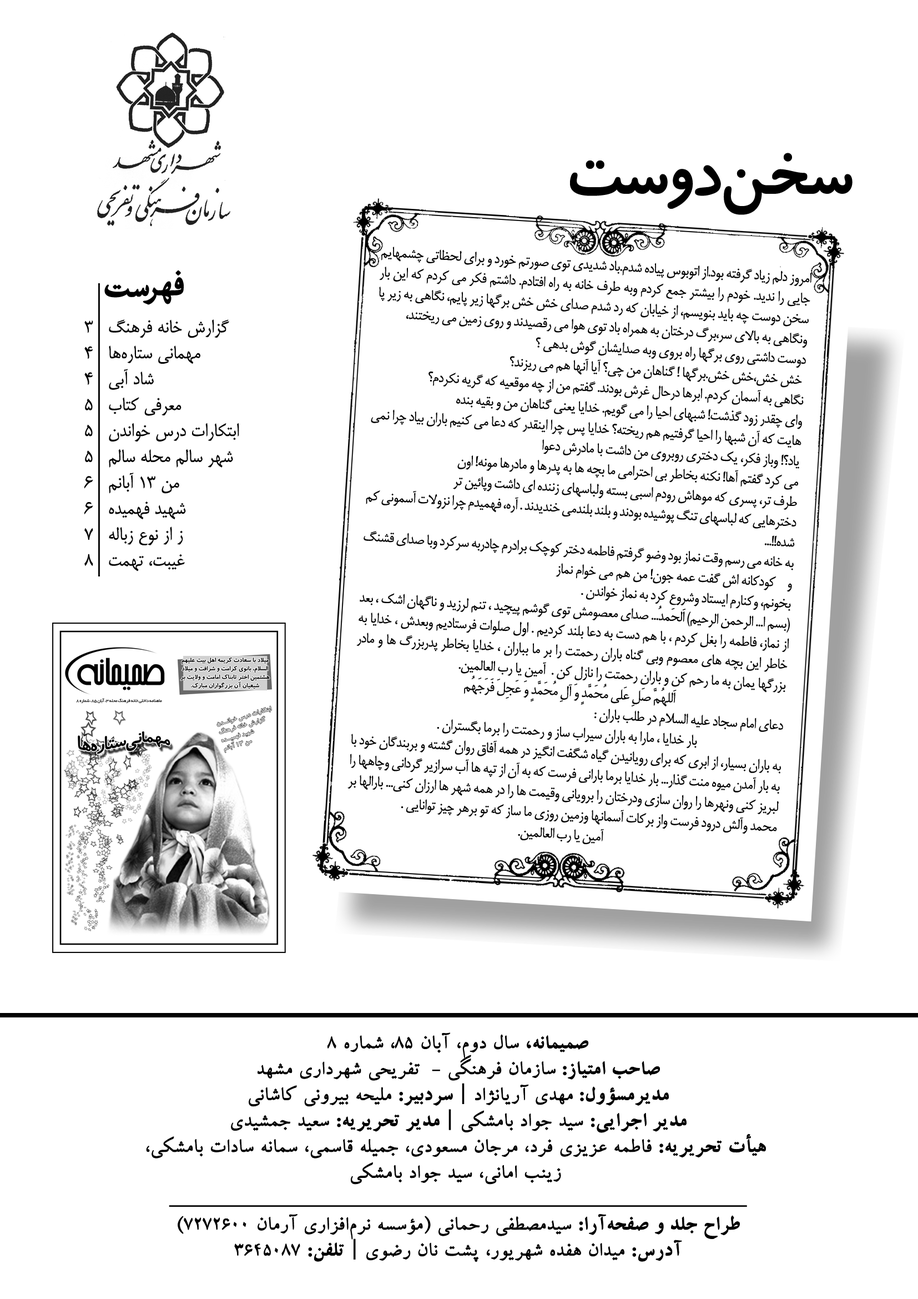
<style>
.page{position:relative;width:918px;height:1299px;background:#ffffff}
.page>*{position:absolute;margin:0}
.t1{font:74px "BKoodakBold";letter-spacing:-0.05em;color:#000000}
.t2{font:17px "BMitra";letter-spacing:-0.025em;color:#000000}
.t3{font:21.6px "BMitra";color:#000000}
.t4{font:21.6px "BCompset";color:#000000;font-weight:bold}
.t5{font:21.6px "BCompsetBold";color:#000000;font-weight:bold}
</style>
<div class="page">
<p class="t1" style="left:570px;top:153px;width:283px;height:62px">سخن دوست</p>
<p class="t2" style="left:348px;top:247px;width:464px;height:597px;text-align:justify;rotate:4deg">امروز دلم زياد گرفته بود.از اتوبوس پياده شدم.باد شديدي توي صورتم خورد و براي لحظاتي چشمهايم جايي را نديد. خودم را بيشتر جمع كردم وبه طرف خانه به راه افتادم. داشتم فكر مي كردم كه اين بار سخن دوست چه بايد بنويسم، از خيابان كه رد شدم صداي خش خش برگها زير پايم، نگاهي به زير پا ونگاهي به بالاي سر،برگ درختان به همراه باد توي هوا مي رقصيدند و روي زمين مي ريختند،<br>دوست داشتي روي برگها راه بروي وبه صدايشان گوش بدهي ؟<br> خش خش،خش خش.برگها ! گناهان من چي؟ آيا آنها هم مي ريزند؟<br>نگاهي به آسمان كردم. ابرها درحال غرش بودند. گفتم من از چه موقعيه كه گريه نكردم؟<br>واي چقدر زود گذشت! شبهاي احيا را مي گويم. خدايا يعني گناهان من و بقيه بنده<br>هايت كه آن شبها را احيا گرفتيم هم ريخته؟ خدايا پس چرا اينقدر كه دعا مي كنيم باران بياد چرا نمي ياد؟! وباز فكر، يك دختري روبروي من داشت با مادرش دعوا<br>مي كرد گفتم آها! نكنه بخاطر بي احترامي ما بچه ها به پدرها و مادرها مونه! اون<br>طرف تر، پسري كه موهاش رودم اسبي بسته ولباسهاي زننده اي داشت وپائين تر<br>دخترهايي كه لباسهاي تنگ پوشيده بودند و بلند بلندمي خنديدند . آره، فهميدم چرا نزولات آسموني كم شده!!...<br>به خانه مي رسم وقت نماز بود وضو گرفتم فاطمه دختر كوچك برادرم چادربه سركرد وبا صداي قشنگ و    كودكانه اش گفت عمه جون! من هم مي خوام نماز<br>بخونم، وكنارم ايستاد وشروع كرد به نماز خواندن . <br>(بسم ا... الرحمن الرحيم) اَلحَمدُ... صداي معصومش توي گوشم پيچيد ، تنم لرزيد و ناگهان اشك ، بعد از نماز، فاطمه را بغل كردم ، با هم دست به دعا بلند كرديم . اول صلوات فرستاديم وبعدش ، خدايا به خاطر اين بچه هاي معصوم وبي گناه باران رحمتت را بر ما بباران ، خدايا بخاطر پدربزرگ ها و مادر بزرگها يمان به ما رحم كن و باران رحمتت را نازل كن .  آمين يا رب العالمين.<br>اَللهُمَّ صَلِ عَلي مُحَمَّدٍ وَ آلِ مُحَمَّدٍ وَ عَجِلَ فَرَجَهُم<br>دعاي امام سجاد عليه السلام در طلب باران :<br>بار خدايا ، مارا به باران سيراب ساز و رحمتت را برما بگستران .<br>به باران بسيار، از ابري كه براي رويانيدن گياه شگفت انگيز در همه آفاق روان گشته و بربندگان خود با به بار آمدن ميوه منت گذار... بار خدايا برما باراني فرست كه به آن از تپه ها آب سرازير گرداني وچاهها را لبريز كني ونهرها را روان سازي ودرختان را بروياني وقيمت ها را در همه شهر ها ارزان كني... بارالها بر محمد وآلش درود فرست واز بركات آسمانها وزمين روزي ما ساز كه تو برهر چيز توانايي .<br>آمين يا رب العالمين.</p>
<p class="t3" style="left:84px;top:319px;width:155px;height:252px;text-align:right">گزارش خانه فرهنگ   3<br>مهماني ستاره‌ها   4<br>شاد آبي   4<br>معرفي كتاب   5<br>ابتكارات درس خواندن   5<br>شهر سالم محله سالم   5<br>من 13 آبانم   6<br>شهيد فهميده   6<br>ز از نوع زباله   7<br>غيبت، تهمت   8</p>
<p class="t4" style="left:146px;top:1032px;width:620px;height:230px;text-align:center"><span class="t5">صميمانه،</span> سال دوم، آبان 85، شماره 8<br><span class="t5">صاحب امتياز: </span>سازمان فرهنگي -  تفريحي شهرداري مشهد<br><span class="t5">مديرمسؤول: </span>مهدي آريانژاد | <span class="t5">سردبير:</span> مليحه بيروني کاشاني<br><span class="t5">مدير اجرايي:</span> سيد جواد بامشکي | <span class="t5">مدير تحريريه:</span> سعيد جمشيدي<br><span class="t5"> هيأت تحريريه:</span> فاطمه عزيزي فرد، مرجان مسعودي، جميله قاسمي، سمانه سادات بامشکي،<br>زينب اماني، سيد جواد بامشکي <br>_________________________________________________<br><span class="t5">طراح جلد و صفحه‌آرا:</span> سيدمصطفي رحماني (مؤسسه نرم‌افزاري آرمان 7272600)<br><span class="t5">آدرس:</span> ميدان هفده شهريور، پشت نان رضوي | <span class="t5">تلفن:</span> 3645087</p>
</div>
